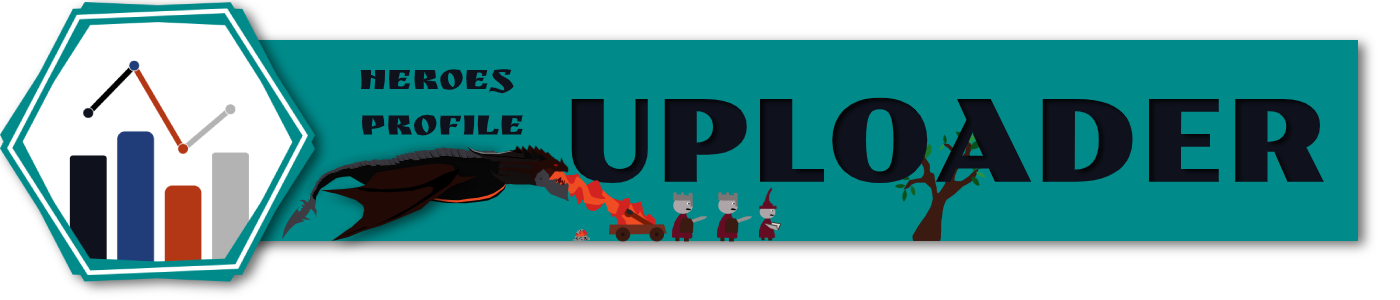
<style>
.page{position:relative;width:1400px;height:300px;background:#008a8a}
.page>*{position:absolute;margin:0}
.t1{font:38px "RuslanDisplay";color:#0f121d}
.t2{font:114px "PollerOne-Regular";color:#0f121d}
</style>
<div class="page">
<p class="t1" style="left:360px;top:69px;width:163px;height:67px;text-align:center">Heroes<br> Profile</p>
<p class="t2" style="left:571px;top:97px;width:753px;height:86px">UPLOADER</p>
</div>
